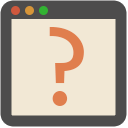
<style>
.page{position:relative;width:128px;height:128px;background:#f2e8d5}
.page>*{position:absolute;margin:0}
.t1{font:112.5px "Consolas";color:#e07e4d}
</style>
<div class="page">
<p class="t1" style="left:49px;top:27px;width:35px;height:79px">?</p>
</div>
